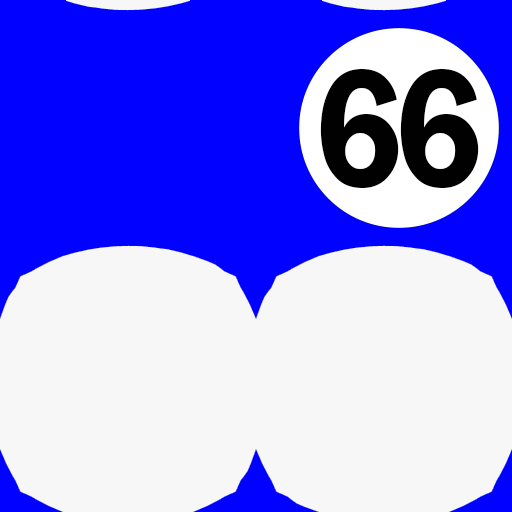
<style>
.page{position:relative;width:512px;height:512px;background:#f7f7f7}
.page>*{position:absolute;margin:0}
.t1{font:172.5px "FranklinGothic-Demi";letter-spacing:-0.05em;color:#010101;scale:0.87 1}
</style>
<div class="page">
<p class="t1" style="left:320px;top:69px;width:159px;height:119px">66</p>
</div>
